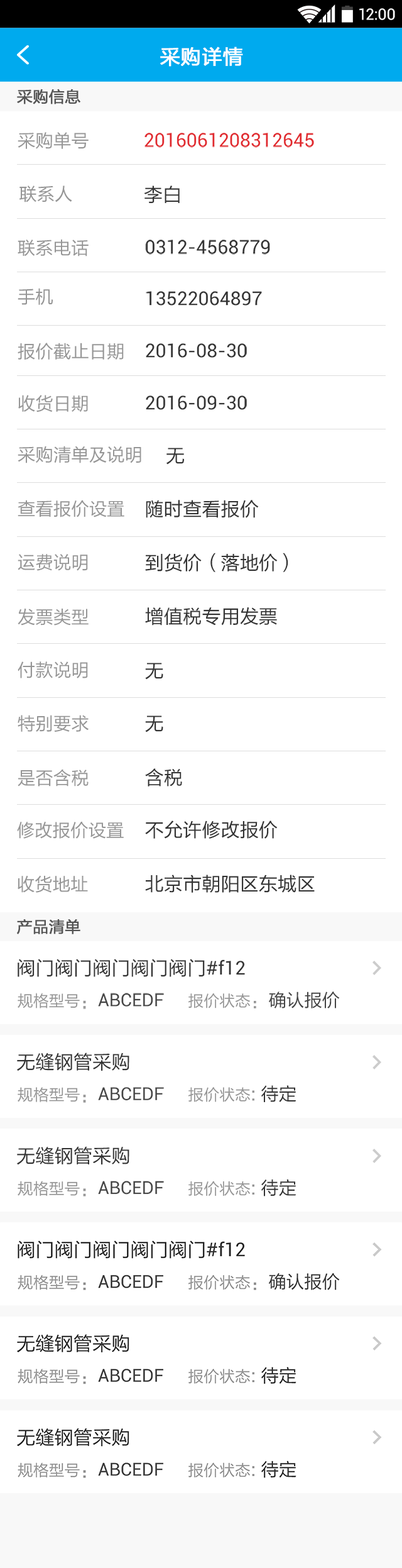
<style>
.page{position:relative;width:402px;height:1568px;background:#ffffff}
.page>*{position:absolute;margin:0}
.t1{font:15.6px "Roboto-Regular";color:#ffffff}
.t2{font:20.1px "FZLTHJW--GB1-0";letter-spacing:0.02em;color:#ffffff;font-weight:bold}
.t3{font:15.6px "FZLTHJW--GB1-0";color:#555555;font-weight:bold}
.t4{font:17.9px "FZLTHJW--GB1-0";color:#969696}
.t5{font:19px "Roboto-Regular";color:#e1292e}
.t6{font:19px "FZLTHJW--GB1-0";color:#333333}
.t7{font:19px "Roboto-Regular";color:#333333}
.t8{font:17.9px "Roboto-Regular";color:#444444}
.t9{font:15.6px "FZLTHJW--GB1-0";color:#969696}
.t10{font:17.9px "FZLTHJW--GB1-0";color:#444444}
.t11{font:17.9px "FZLTHJW--GB1-0";color:#333333}
</style>
<div class="page">
<p class="t1" style="left:360px;top:8px;width:35px;height:12px">12:00</p>
<p class="t2" style="left:160px;top:47px;width:83px;height:20px">采购详情</p>
<p class="t3" style="left:17px;top:89px;width:63px;height:15px">采购信息</p>
<p class="t4" style="left:18px;top:132px;width:71px;height:17px">采购单号</p>
<p class="t5" style="left:145px;top:133px;width:169px;height:15px">2016061208312645</p>
<p class="t4" style="left:19px;top:185px;width:53px;height:17px">联系人</p>
<p class="t6" style="left:144px;top:185px;width:36px;height:18px">李白</p>
<p class="t4" style="left:18px;top:240px;width:71px;height:17px">联系电话</p>
<p class="t7" style="left:145px;top:240px;width:125px;height:15px">0312-4568779</p>
<p class="t4" style="left:18px;top:288px;width:35px;height:17px">手机</p>
<p class="t7" style="left:146px;top:291px;width:116px;height:15px">13522064897</p>
<p class="t4" style="left:18px;top:343px;width:106px;height:17px">报价截止日期</p>
<p class="t7" style="left:146px;top:343px;width:101px;height:15px">2016-08-30</p>
<p class="t4" style="left:18px;top:395px;width:70px;height:17px">收货日期</p>
<p class="t7" style="left:146px;top:395px;width:101px;height:15px">2016-09-30</p>
<p class="t4" style="left:18px;top:446px;width:123px;height:17px">采购清单及说明</p>
<p class="t6" style="left:167px;top:448px;width:17px;height:17px">无</p>
<p class="t4" style="left:18px;top:500px;width:106px;height:17px">查看报价设置</p>
<p class="t6" style="left:146px;top:500px;width:113px;height:18px">随时查看报价</p>
<p class="t4" style="left:18px;top:554px;width:70px;height:17px">运费说明</p>
<p class="t6" style="left:145px;top:553px;width:144px;height:19px">到货价（落地价）</p>
<p class="t4" style="left:18px;top:609px;width:71px;height:17px">发票类型</p>
<p class="t6" style="left:145px;top:607px;width:132px;height:19px">增值税专用发票</p>
<p class="t4" style="left:18px;top:661px;width:70px;height:17px">付款说明</p>
<p class="t6" style="left:145px;top:663px;width:18px;height:17px">无</p>
<p class="t4" style="left:18px;top:715px;width:71px;height:17px">特别要求</p>
<p class="t6" style="left:145px;top:715px;width:18px;height:17px">无</p>
<p class="t4" style="left:18px;top:769px;width:71px;height:18px">是否含税</p>
<p class="t6" style="left:145px;top:768px;width:37px;height:19px">含税</p>
<p class="t4" style="left:17px;top:822px;width:107px;height:17px">修改报价设置</p>
<p class="t6" style="left:145px;top:820px;width:133px;height:19px">不允许修改报价</p>
<p class="t4" style="left:18px;top:875px;width:70px;height:18px">收货地址</p>
<p class="t6" style="left:145px;top:875px;width:170px;height:18px">北京市朝阳区东城区</p>
<p class="t3" style="left:17px;top:919px;width:63px;height:15px">产品清单</p>
<p class="t6" style="left:18px;top:959px;width:227px;height:18px">阀门阀门阀门阀门阀门<span class="t7">#f12</span></p>
<p class="t8" style="left:18px;top:993px;width:146px;height:16px"><span class="t9">规格型号</span><span class="t4">：</span>ABCEDF</p>
<p class="t9" style="left:189px;top:991px;width:151px;height:17px">报价状态<span class="t4">：</span><span class="t10">确认报价</span></p>
<p class="t6" style="left:17px;top:1052px;width:113px;height:19px">无缝钢管采购</p>
<p class="t9" style="left:189px;top:1085px;width:108px;height:17px">报价状态<span class="t4">: </span><span class="t11">待定</span></p>
<p class="t8" style="left:18px;top:1087px;width:146px;height:16px"><span class="t9">规格型号</span><span class="t4">：</span>ABCEDF</p>
<p class="t6" style="left:17px;top:1147px;width:113px;height:18px">无缝钢管采购</p>
<p class="t8" style="left:18px;top:1181px;width:146px;height:15px"><span class="t9">规格型号</span><span class="t4">：</span>ABCEDF</p>
<p class="t9" style="left:189px;top:1179px;width:108px;height:17px">报价状态<span class="t4">: </span><span class="t11">待定</span></p>
</div>
